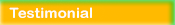
<style>
.page{position:relative;width:175px;height:25px;background:#ffba00}
.page>*{position:absolute;margin:0}
.t1{font:14.2px "ArialRoundedMTBold";color:#fdfcfc;scale:1.07 1}
</style>
<div class="page">
<p class="t1" style="left:9px;top:7px;width:83px;height:11px">Testimonial</p>
</div>
